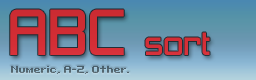
<style>
.page{position:relative;width:256px;height:80px}
.page>*{position:absolute;margin:0}
.t1{font:30px "ZeroThrees";color:#d12d34}
.t2{font:60px "ZeroThrees";color:#d12d34}
.t3{font:10px "Bit-Darling10-(sRB)";color:#52646f}
</style>
<div class="page">
<p class="t1" style="left:10px;top:9px;width:200px;height:46px"><span class="t2">ABC </span>sort</p>
<p class="t3" style="left:11px;top:66px;width:118px;height:8px">Numeric, A-Z, Other.</p>
</div>
